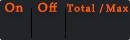
<style>
.page{position:relative;width:130px;height:40px;background:#212529}
.page>*{position:absolute;margin:0}
.t1{font:12px "PalatinoLinotype-Roman";letter-spacing:0.1em;color:#ff5a00;font-weight:bold}
.t2{font:10px "PalatinoLinotype-Roman";letter-spacing:0.1em;color:#ff5a00;font-weight:bold}
</style>
<div class="page">
<p class="t1" style="left:5px;top:2px;width:18px;height:10px">On</p>
<p class="t1" style="left:38px;top:2px;width:19px;height:10px">Off</p>
<p class="t2" style="left:67px;top:4px;width:37px;height:9px">Total /</p>
<p class="t2" style="left:106px;top:4px;width:23px;height:8px">Max</p>
</div>
